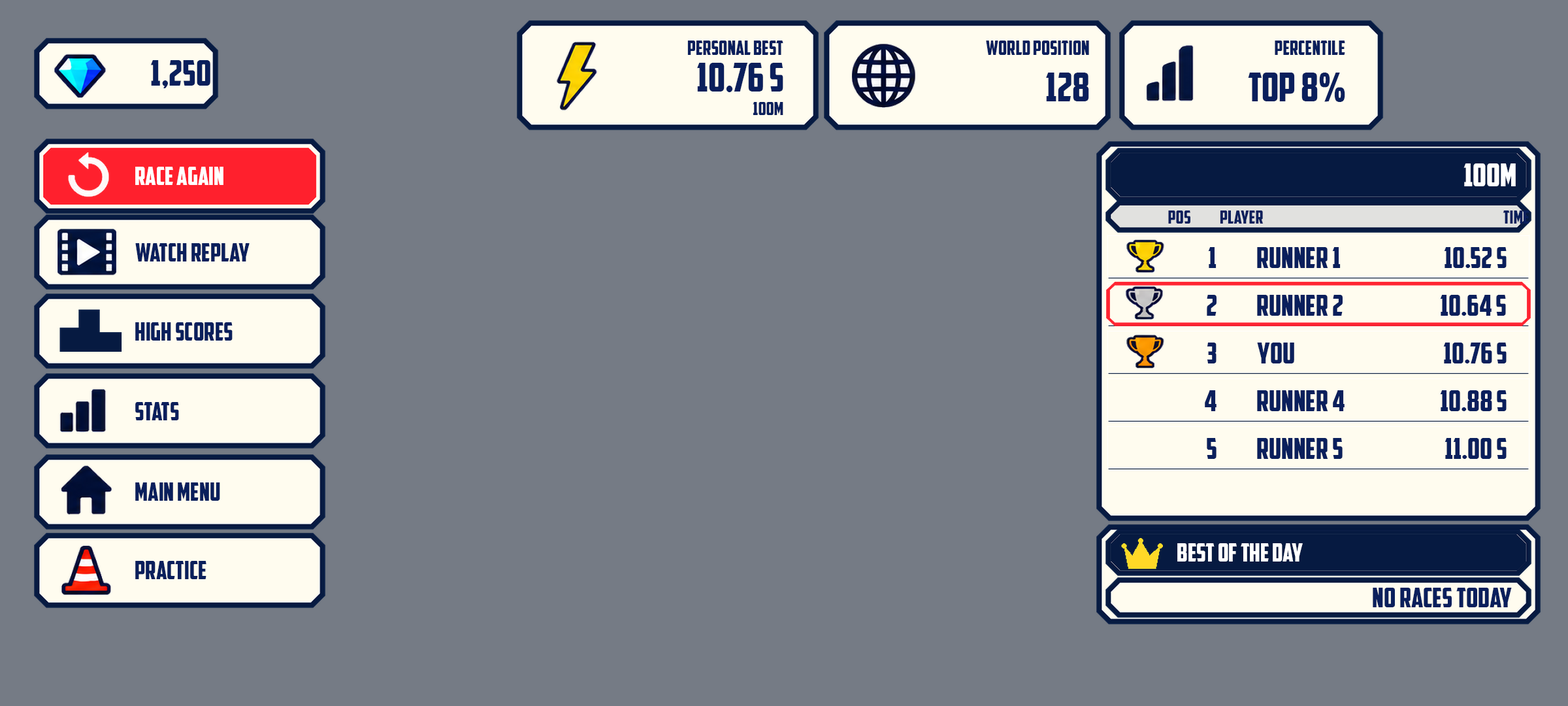
<style>
.page{position:relative;width:1568px;height:706px;background:#757b85}
.page>*{position:absolute;margin:0}
.t1{font:19.6px "AmericanCaptain";color:#0a1f5c}
.t2{font:35.3px "AmericanCaptain";color:#0a1f5c}
.t3{font:39.2px "AmericanCaptain";color:#0a1f5c}
.t4{font:18.3px "AmericanCaptain";color:#0a1f5c}
.t5{font:24.8px "AmericanCaptain";color:#ffffff}
.t6{font:31.4px "AmericanCaptain";color:#ffffff}
.t7{font:24.8px "AmericanCaptain";color:#0a1f5c}
.t8{font:28.7px "AmericanCaptain";color:#0a1f5c}
.t9{font:27.4px "AmericanCaptain";color:#0a1f5c}
</style>
<div class="page">
<p class="t1" style="left:687px;top:41px;width:96px;height:14px">PERSONAL BEST</p>
<p class="t1" style="left:986px;top:41px;width:103px;height:14px">WORLD POSITION</p>
<p class="t1" style="left:1275px;top:41px;width:70px;height:14px">PERCENTILE</p>
<p class="t2" style="left:150px;top:60px;width:60px;height:28px">1,250</p>
<p class="t3" style="left:697px;top:63px;width:86px;height:29px">10.76 s</p>
<p class="t3" style="left:1046px;top:73px;width:43px;height:28px">128</p>
<p class="t3" style="left:1248px;top:73px;width:97px;height:29px">TOP 8%</p>
<p class="t4" style="left:753px;top:102px;width:30px;height:13px">100m</p>
<p class="t5" style="left:135px;top:167px;width:88px;height:18px">Race Again</p>
<p class="t6" style="left:1463px;top:163px;width:53px;height:23px">100m</p>
<p class="t4" style="left:1168px;top:210px;width:22px;height:13px">POS</p>
<p class="t4" style="left:1220px;top:210px;width:44px;height:13px">PLAYER</p>
<p class="t4" style="left:1503px;top:210px;width:26px;height:13px">TIME</p>
<p class="t7" style="left:135px;top:243px;width:115px;height:18px">Watch Replay</p>
<p class="t8" style="left:1208px;top:247px;width:9px;height:21px">1</p>
<p class="t8" style="left:1257px;top:247px;width:84px;height:21px">Runner 1</p>
<p class="t8" style="left:1444px;top:247px;width:63px;height:21px">10.52 s</p>
<p class="t8" style="left:1207px;top:295px;width:10px;height:21px">2</p>
<p class="t8" style="left:1257px;top:295px;width:86px;height:21px">Runner 2</p>
<p class="t8" style="left:1440px;top:295px;width:66px;height:21px">10.64 s</p>
<p class="t7" style="left:135px;top:322px;width:98px;height:18px">High Scores</p>
<p class="t8" style="left:1207px;top:342px;width:10px;height:21px">3</p>
<p class="t8" style="left:1257px;top:342px;width:37px;height:21px">YOU</p>
<p class="t8" style="left:1443px;top:342px;width:64px;height:21px">10.76 s</p>
<p class="t7" style="left:135px;top:402px;width:44px;height:18px">Stats</p>
<p class="t8" style="left:1205px;top:390px;width:12px;height:21px">4</p>
<p class="t8" style="left:1257px;top:390px;width:88px;height:21px">Runner 4</p>
<p class="t8" style="left:1440px;top:390px;width:67px;height:21px">10.88 s</p>
<p class="t8" style="left:1207px;top:438px;width:10px;height:21px">5</p>
<p class="t8" style="left:1257px;top:438px;width:86px;height:21px">Runner 5</p>
<p class="t8" style="left:1445px;top:438px;width:62px;height:21px">11.00 s</p>
<p class="t7" style="left:135px;top:482px;width:85px;height:18px">Main Menu</p>
<p class="t5" style="left:1177px;top:543px;width:126px;height:18px">BEST OF THE DAY</p>
<p class="t7" style="left:135px;top:561px;width:71px;height:18px">Practice</p>
<p class="t9" style="left:1373px;top:587px;width:139px;height:20px">No races today</p>
</div>
